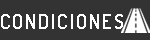
<style>
.page{position:relative;width:150px;height:40px;background:#333333}
.page>*{position:absolute;margin:0}
.t1{font:20px "Dosis-SemiBold";letter-spacing:0.075em;color:#ffffff}
</style>
<div class="page">
<p class="t1" style="left:1px;top:14px;width:122px;height:15px">CONDICIONES</p>
</div>
